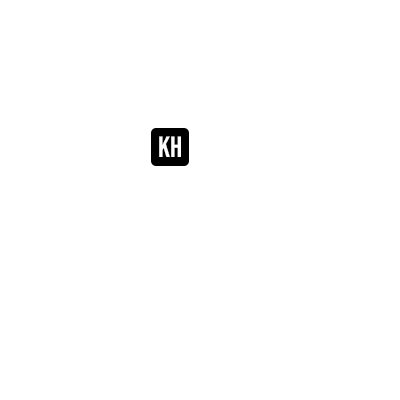
<style>
.page{position:relative;width:400px;height:400px;background:#ffffff}
.page>*{position:absolute;margin:0}
.t1{font:29.2px "BebasNeue-Regular";color:#ffffff}
</style>
<div class="page">
<p class="t1" style="left:159px;top:136px;width:22px;height:21px">kh</p>
</div>
